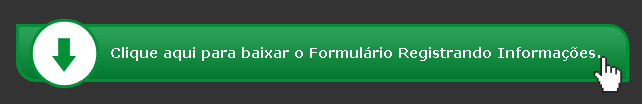
<style>
.page{position:relative;width:642px;height:104px;background:#333333}
.page>*{position:absolute;margin:0}
.t1{font:14px "Verdana-Bold";color:#ffffff}
</style>
<div class="page">
<p class="t1" style="left:111px;top:47px;width:489px;height:14px">Clique aqui para baixar o Formulário Registrando Informações.</p>
</div>
